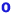
<style>
.page{position:relative;width:12px;height:14px;background:#ffffff}
.page>*{position:absolute;margin:0}
.t1{font:14px "BookmanOldStyle-Bold";letter-spacing:0.05em;color:#1b1bd7}
</style>
<div class="page">
<p class="t1" style="left:1px;top:2px;width:10px;height:11px">0</p>
</div>
